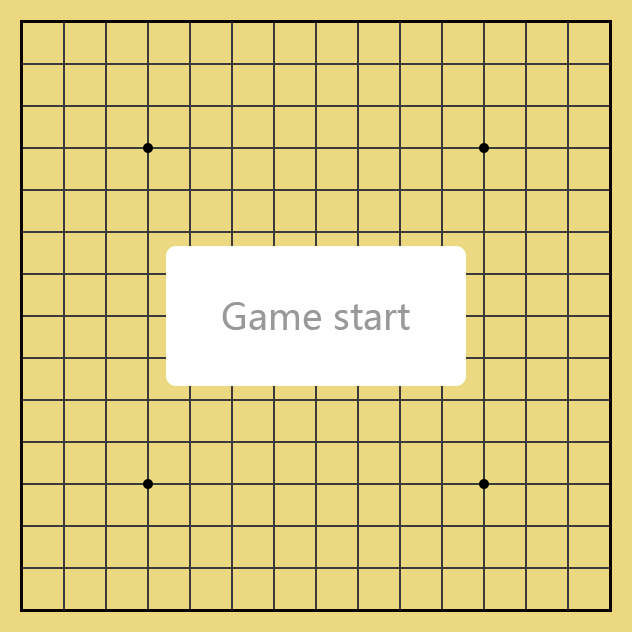
<style>
.page{position:relative;width:632px;height:632px;background:#ebd881}
.page>*{position:absolute;margin:0}
.t1{font:36px "MicrosoftYaHei";color:#999999}
</style>
<div class="page">
<p class="t1" style="left:222px;top:302px;width:188px;height:28px">Game start</p>
</div>
